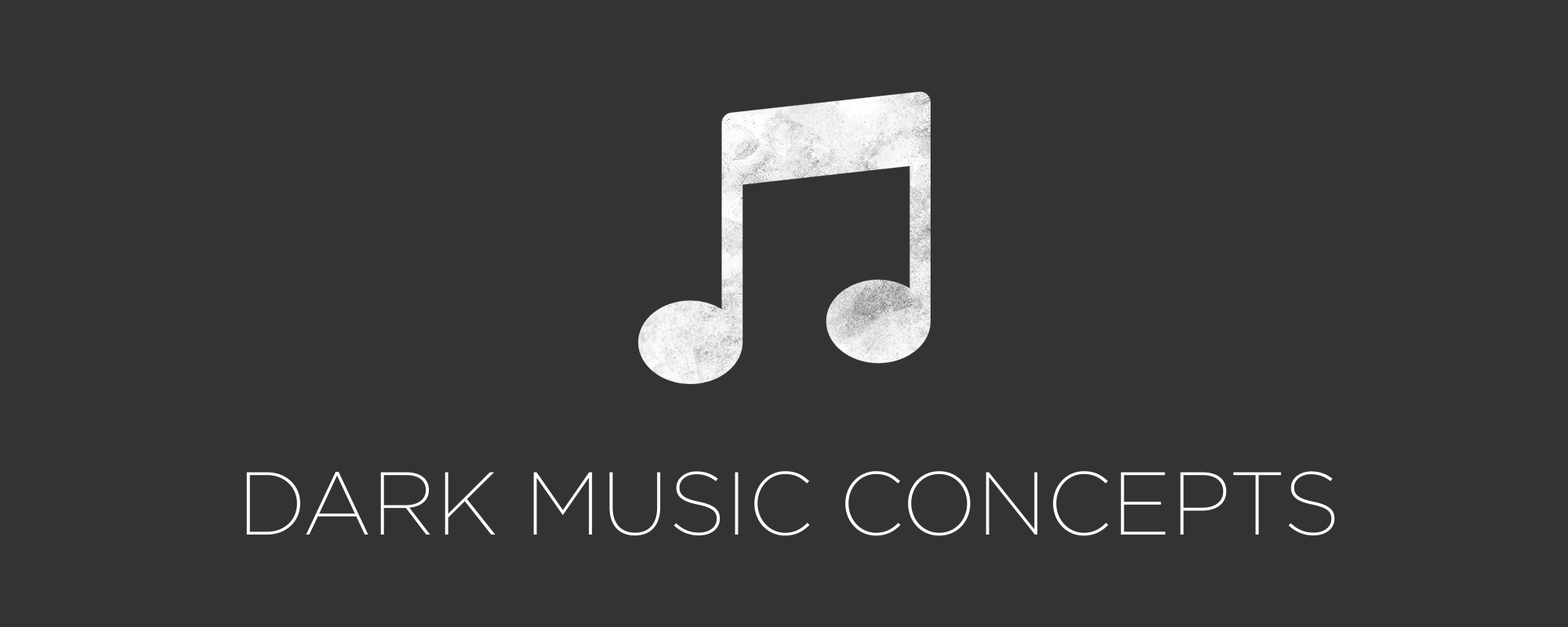
<style>
.page{position:relative;width:1568px;height:627px;background:#333333}
.page>*{position:absolute;margin:0}
.t1{font:88.9px "Gotham-XLight";color:#ffffff}
</style>
<div class="page">
<p class="t1" style="left:246px;top:471px;width:1089px;height:65px">DARK MUSIC CONCEPTS</p>
</div>
